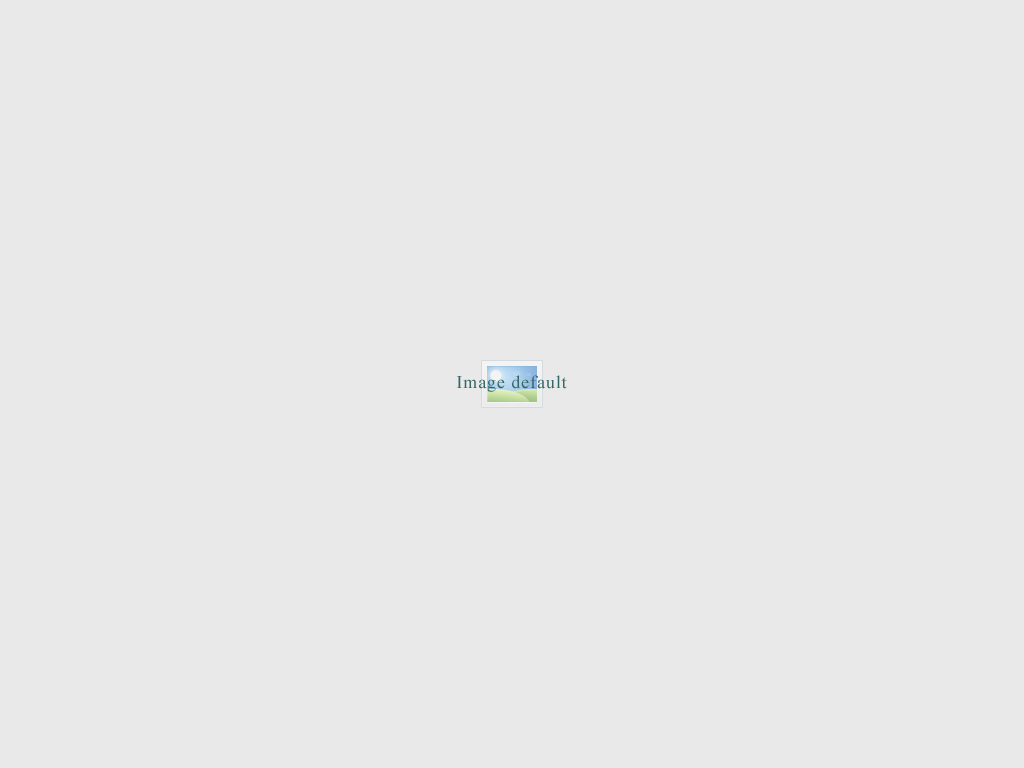
<style>
.page{position:relative;width:1024px;height:768px;background:#e9e9e9}
.page>*{position:absolute;margin:0}
.t1{font:18px "TimesNewRomanPSMT";letter-spacing:0.05em;color:#336666}
</style>
<div class="page">
<p class="t1" style="left:456px;top:375px;width:111px;height:17px">Image default</p>
</div>
